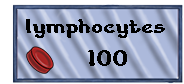
<style>
.page{position:relative;width:184px;height:84px}
.page>*{position:absolute;margin:0}
.t1{font:20px "ChildrenStories";letter-spacing:-0.005em;color:#000000}
.t2{font:24px "ChildrenStories";letter-spacing:-0.005em;color:#000000}
</style>
<div class="page">
<p class="t1" style="left:26px;top:19px;width:139px;height:19px">lymphocytes</p>
<p class="t2" style="left:88px;top:50px;width:39px;height:16px">100</p>
</div>
